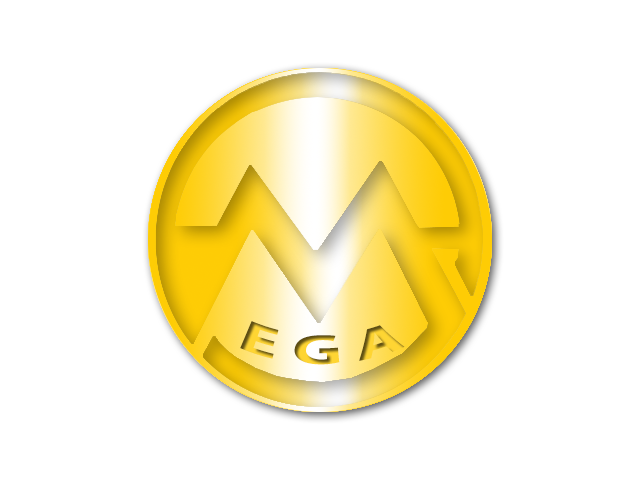
<style>
.page{position:relative;width:640px;height:480px;background:#ffffff}
.page>*{position:absolute;margin:0}
.t1{font:41.7px "MyriadPro-Bold";scale:1.5 1}
</style>
<div class="page">
<p class="t1" style="left:240px;top:321px;width:165px;height:44px">E G A</p>
</div>
